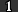
<style>
.page{position:relative;width:18px;height:12px;background:#333333}
.page>*{position:absolute;margin:0}
.t1{font:17px "Perpetua-Bold";color:#ffffff}
</style>
<div class="page">
<p class="t1" style="left:6px;top:1px;width:5px;height:10px">1</p>
</div>
